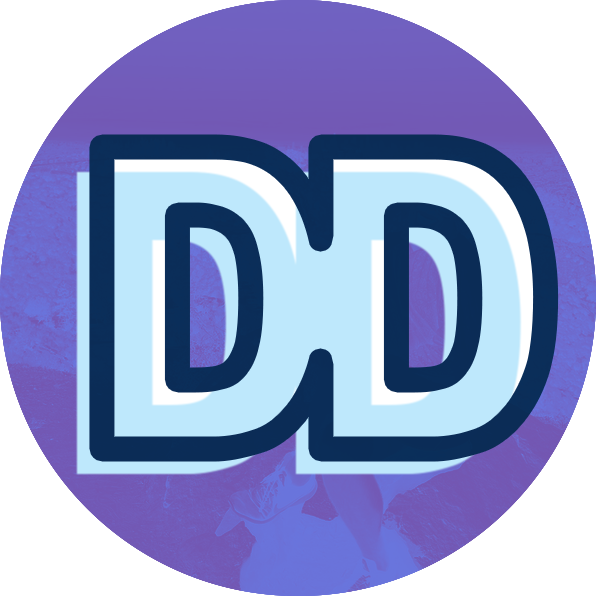
<style>
.page{position:relative;width:596px;height:596px;background:#ffffff}
.page>*{position:absolute;margin:0}
.t1{font:422.5px "Arial-Black";letter-spacing:-0.135em;scale:0.81 1}
</style>
<div class="page">
<p class="t1" style="left:101px;top:147px;width:445px;height:302px">DD</p>
</div>
